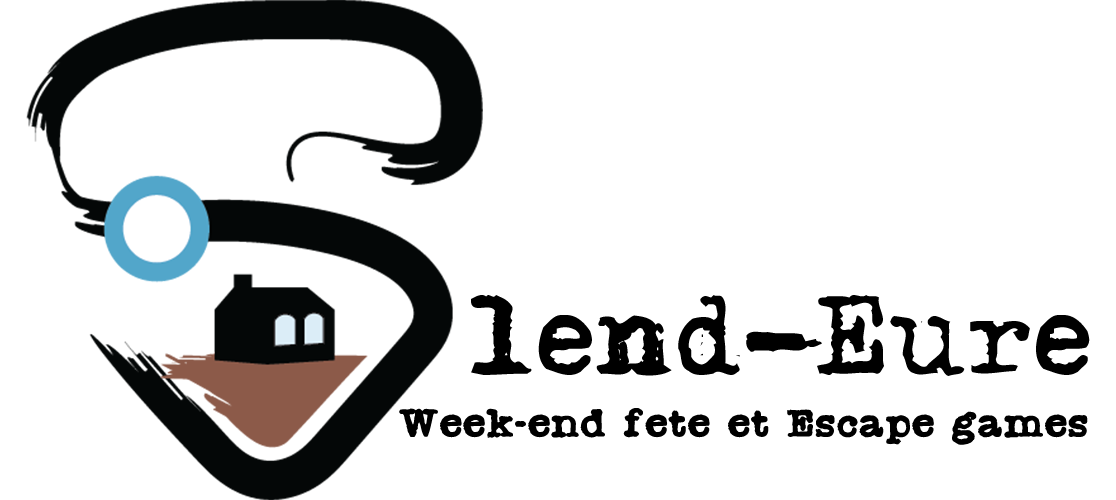
<style>
.page{position:relative;width:1116px;height:500px;background:#ffffff}
.page>*{position:absolute;margin:0}
.t1{font:100px "Adler";color:#000000}
.t2{font:33.3px "RadioNewsman";color:#000000}
</style>
<div class="page">
<p class="t1" style="left:471px;top:295px;width:619px;height:81px">lend-Eure</p>
<p class="t2" style="left:399px;top:408px;width:689px;height:37px">Week-end fete et Escape games</p>
</div>
